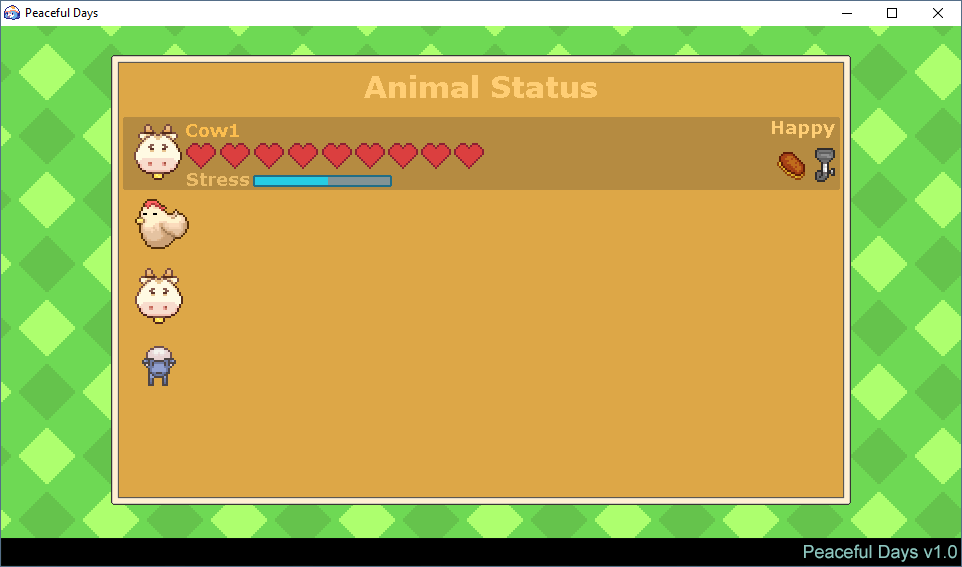
<style>
.page{position:relative;width:962px;height:567px;background:#dda747}
.page>*{position:absolute;margin:0}
.t1{font:30px "Verdana-Bold";color:#ffce75}
.t2{font:18px "Verdana-Bold";color:#fcbe4f}
.t3{font:18px "Verdana-Bold";color:#ffce75}
.t4{font:18px "Verdana-Bold";color:#ecbd69}
</style>
<div class="page">
<p class="t1" style="left:364px;top:75px;width:233px;height:23px">Animal Status</p>
<p class="t2" style="left:186px;top:124px;width:53px;height:13px">Cow1</p>
<p class="t3" style="left:772px;top:121px;width:63px;height:17px">Happy</p>
<p class="t4" style="left:187px;top:173px;width:62px;height:13px">Stress</p>
</div>
